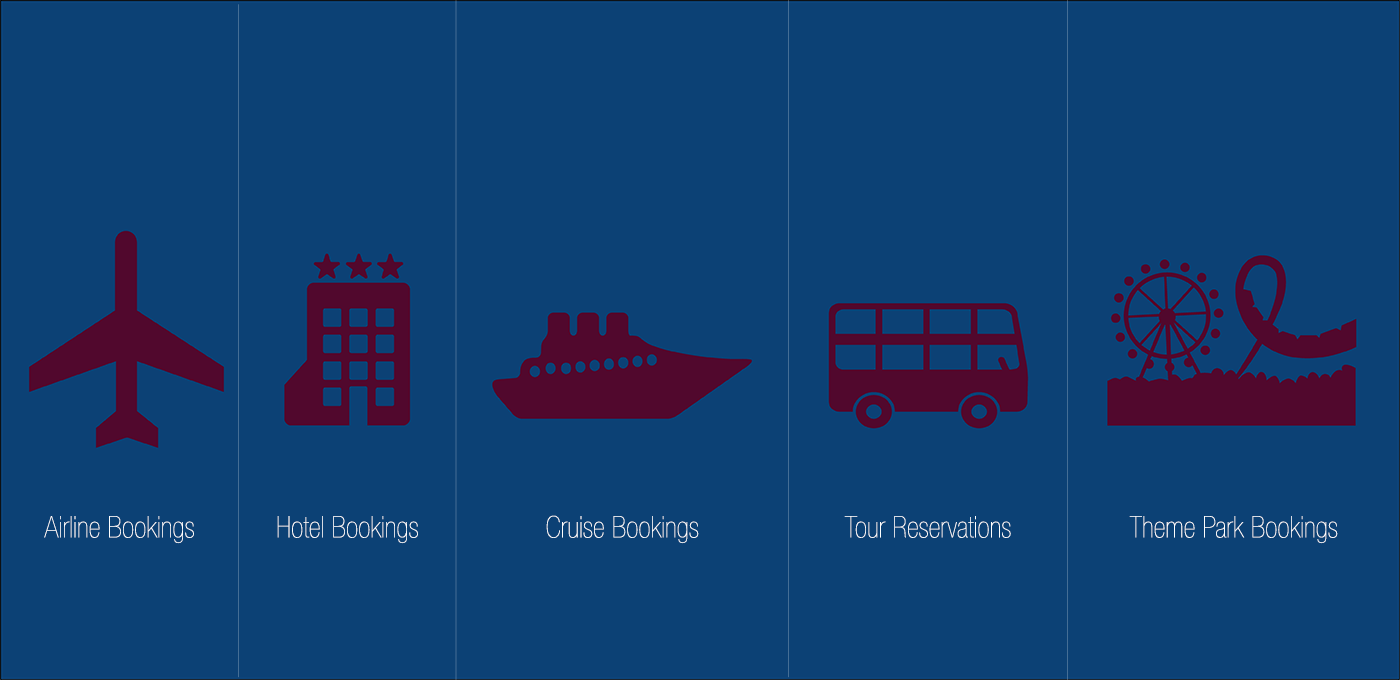
<style>
.page{position:relative;width:1400px;height:680px;background:#0c4175}
.page>*{position:absolute;margin:0}
.t1{font:30px "HelveticaNeueLTCom-UltLtCn";color:#ffffff}
</style>
<div class="page">
<p class="t1" style="left:44px;top:516px;width:150px;height:28px">Airline Bookings</p>
<p class="t1" style="left:277px;top:516px;width:141px;height:28px">Hotel Bookings</p>
<p class="t1" style="left:546px;top:515px;width:153px;height:29px">Cruise Bookings</p>
<p class="t1" style="left:844px;top:516px;width:167px;height:22px">Tour Reservations</p>
<p class="t1" style="left:1129px;top:516px;width:209px;height:28px">Theme Park Bookings</p>
</div>
